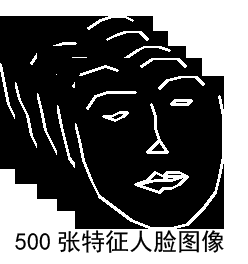
<style>
.page{position:relative;width:248px;height:264px;background:#000000}
.page>*{position:absolute;margin:0}
.t1{font:24px "SimHei";color:#000000}
</style>
<div class="page">
<p class="t1" style="left:15px;top:230px;width:209px;height:23px">500张特征人脸图像</p>
</div>
